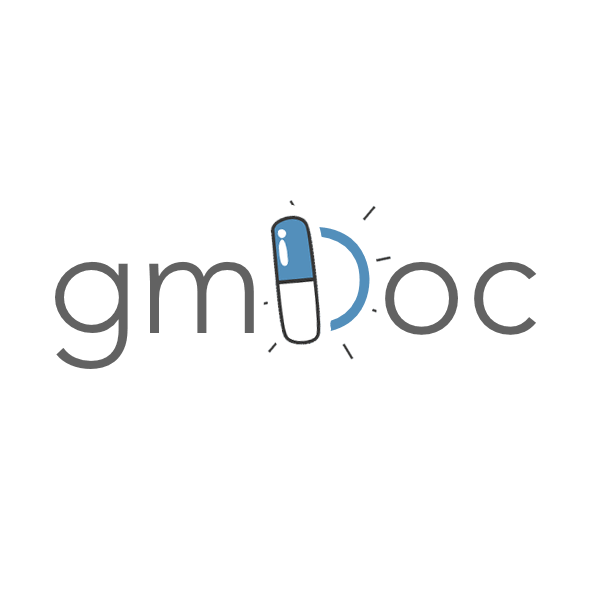
<style>
.page{position:relative;width:600px;height:600px;background:#ffffff}
.page>*{position:absolute;margin:0}
.t1{font:150px "Avenir-Light";color:#626262}
.t2{font:150px "Avenir-Light";color:#538fbb}
</style>
<div class="page">
<p class="t1" style="left:55px;top:226px;width:482px;height:143px">gm<span class="t2">D</span>oc</p>
</div>
